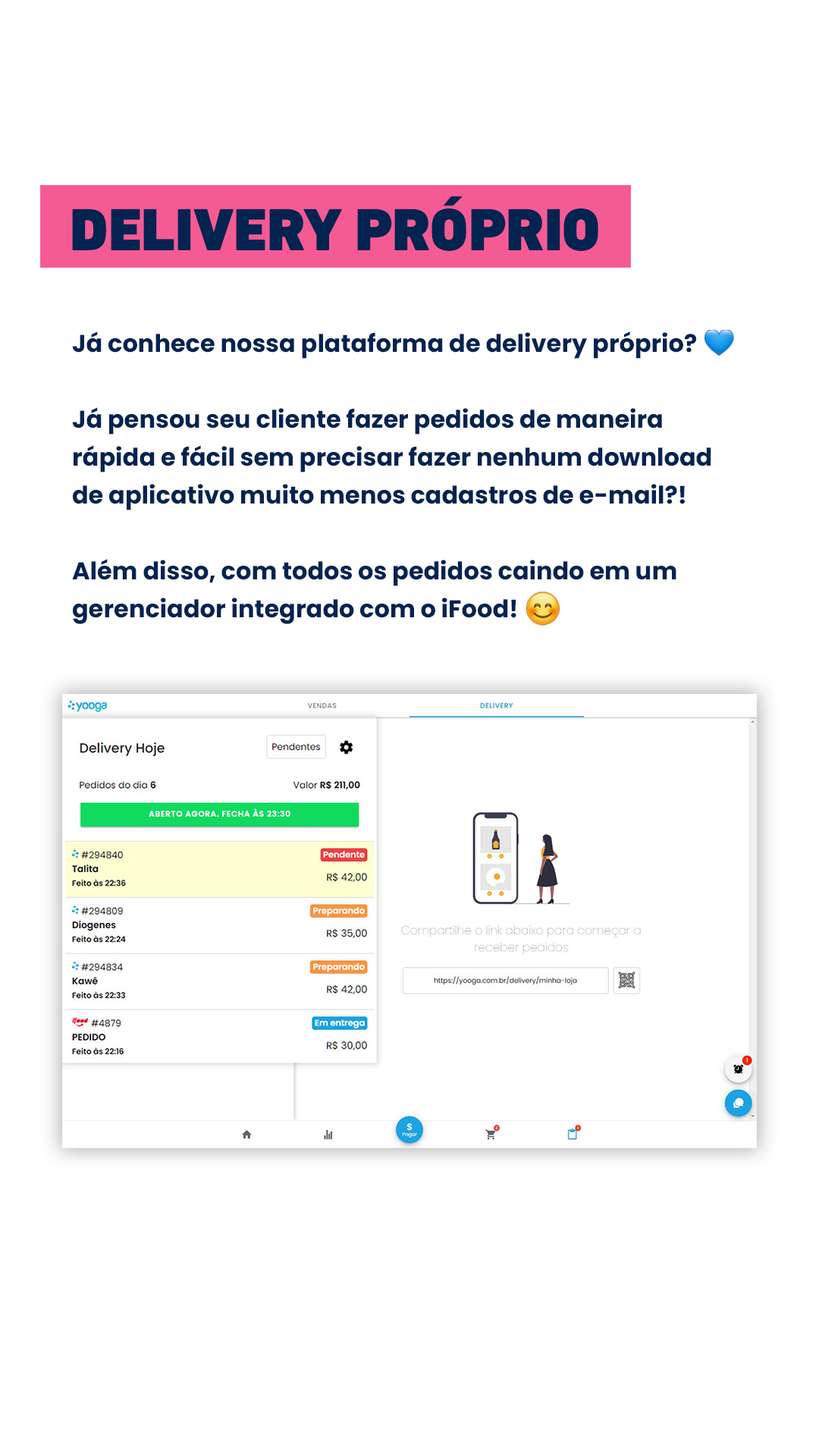
<style>
.page{position:relative;width:819px;height:1456px;background:#ffffff}
.page>*{position:absolute;margin:0}
.t1{font:60.5px "DINNextLTPro-Black";color:#032351;text-transform:uppercase}
.t2{font:24.3px/37.9px "Poppins-Bold";color:#032351}
</style>
<div class="page">
<p class="t1" style="left:72px;top:196px;width:526px;height:55px">DELIVERY PRÓPRIO</p>
<p class="t2" style="left:72px;top:331px;width:639px;height:293px">Já conhece nossa plataforma de delivery próprio?<br><br>Já pensou seu cliente fazer pedidos de maneira rápida e fácil sem precisar fazer nenhum download de aplicativo muito menos cadastros de e-mail?!<br><br>Além disso, com todos os pedidos caindo em um<br>gerenciador integrado com o iFood!</p>
</div>
